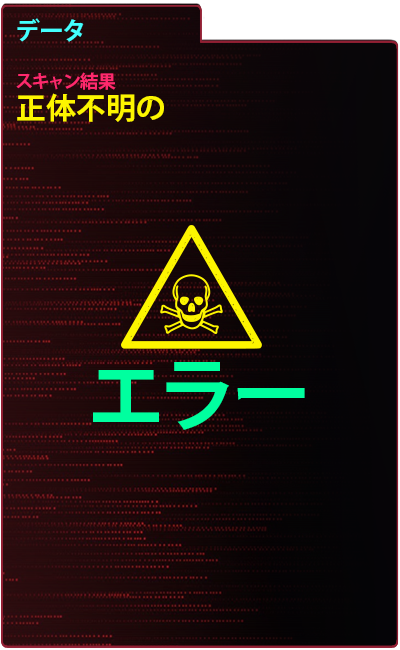
<style>
.page{position:relative;width:400px;height:650px}
.page>*{position:absolute;margin:0}
.t1{font:25px "KozGoPr6N-Bold";color:#43ffff}
.t2{font:18px "KozGoPr6N-Bold";color:#ff296d}
.t3{font:30px "KozGoPr6N-Bold";color:#fdf500}
.t4{font:80px "KozGoPr6N-Bold";color:#00ff9f}
</style>
<div class="page">
<p class="t1" style="left:17px;top:18px;width:67px;height:24px">データ</p>
<p class="t2" style="left:16px;top:72px;width:100px;height:18px">スキャン結果</p>
<p class="t3" style="left:17px;top:93px;width:147px;height:29px">正体不明の</p>
<p class="t4" style="left:93px;top:362px;width:212px;height:68px">エラー</p>
</div>
